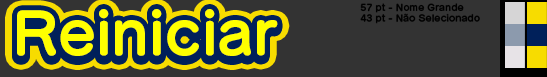
<style>
.page{position:relative;width:547px;height:77px;background:#333333}
.page>*{position:absolute;margin:0}
.t1{font:57px "SeuratPro-B";color:#ffff00}
.t2{font:57px "SeuratPro-B"}
</style>
<div class="page">
<p class="t1" style="left:17px;top:11px;width:261px;height:47px">Reiniciar</p>
<p class="t2" style="left:17px;top:13px;width:261px;height:47px">Reiniciar</p>
<p class="t1" style="left:17px;top:12px;width:261px;height:47px">Reiniciar</p>
<p class="t1" style="left:17px;top:11px;width:261px;height:47px">Reiniciar</p>
<p class="t1" style="left:17px;top:10px;width:261px;height:47px">Reiniciar</p>
<p class="t1" style="left:17px;top:9px;width:261px;height:47px">Reiniciar</p>
</div>
